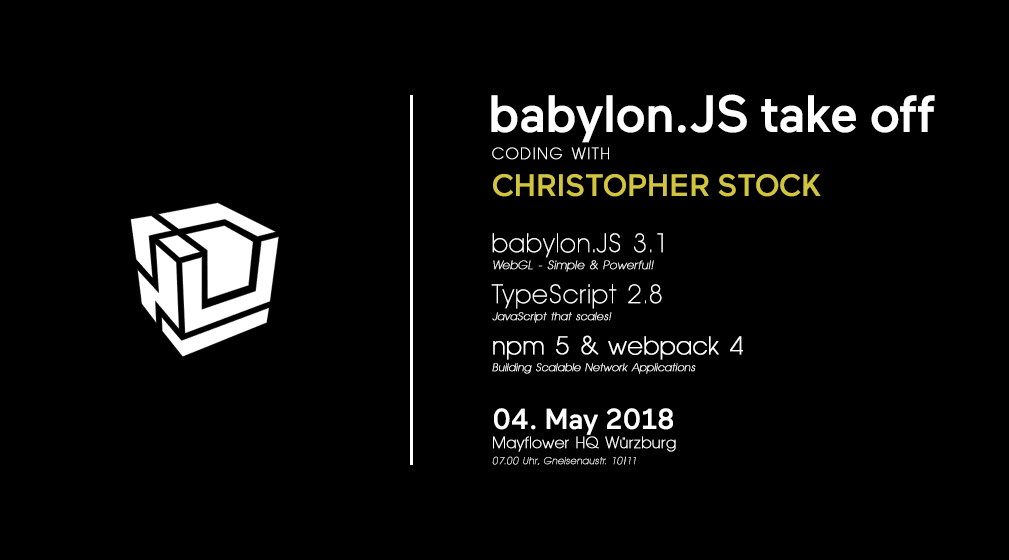
<style>
.page{position:relative;width:1009px;height:560px;background:#000000}
.page>*{position:absolute;margin:0}
.t1{font:11px/17px "AvantageSmallNormal";letter-spacing:0.02em;color:#ffffff;font-weight:bold;font-style:italic}
.t2{font:52.4px "Maax-Medium";letter-spacing:-0.02em;color:#ffffff}
.t3{font:16px/27px "AvantageSmallNormal";letter-spacing:0.1em;color:#ffffff;font-weight:bold}
.t4{font:31px/37px "Maax-Medium";letter-spacing:-0.01em;color:#d1c43f}
.t5{font:26px/24px "AvantageSmallNormal";letter-spacing:0.02em;color:#ffffff;font-weight:bold}
.t6{font:12px/17px "AvantageSmallNormal";letter-spacing:0.02em;color:#ffffff;font-weight:bold;font-style:italic}
.t7{font:26px/34px "AvantageSmallNormal";letter-spacing:0.02em;color:#ffffff;font-weight:bold}
.t8{font:25px/34px "AvantageSmallNormal";letter-spacing:0.02em;color:#ffffff;font-weight:bold}
.t9{font:29px/58px "Maax-Medium";letter-spacing:-0.01em;color:#ffffff}
.t10{font:16px/19px "AvantageSmallNormal";letter-spacing:0.02em;color:#ffffff;font-weight:bold}
.t11{font:10px/16px "AvantageSmallNormal";letter-spacing:0.02em;color:#ffffff;font-weight:bold;font-style:italic}
</style>
<div class="page">
<p class="t1" style="left:491px;top:94px;width:444px;height:371px"><span class="t2">babylon.JS take off<br></span><span class="t3">CODING WITH<br></span><span class="t4">CHRISTOPHER STOCK<br><br></span><span class="t5">babylon.JS 3.1<br></span><span class="t6">WebGL - Simple &amp; Powerful!<br></span><span class="t7">TypeScript 2.8<br></span>JavaScript that scales!<br><span class="t8">npm 5 &amp; webpack 4<br></span>Building Scalable Network Applications<br><span class="t9">04. May 2018<br></span><span class="t10">Mayflower HQ Würzburg<br></span><span class="t11">07.00 Uhr, Gneisenaustr. 10|11</span></p>
</div>
